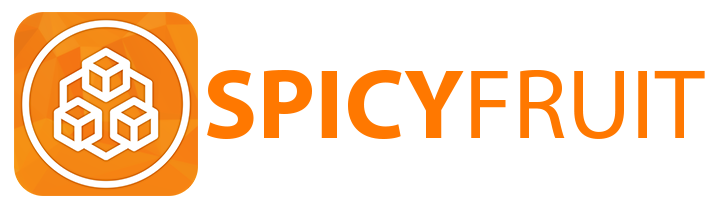
<style>
.page{position:relative;width:716px;height:208px;background:#ffffff}
.page>*{position:absolute;margin:0}
.t1{font:100px "MyriadPro-Bold";color:#ff7800}
.t2{font:100px "MyriadPro-Regular";color:#ff7800}
</style>
<div class="page">
<p class="t1" style="left:207px;top:69px;width:498px;height:70px">SPICY<span class="t2">FRUIT</span></p>
</div>
